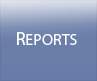
<style>
.page{position:relative;width:97px;height:81px;background:#6b7ea8}
.page>*{position:absolute;margin:0}
.t1{font:16px "MyriadPro-Regular";color:#fefeff}
.t2{font:18px "MyriadPro-Regular";color:#fefeff}
</style>
<div class="page">
<p class="t1" style="left:17px;top:32px;width:60px;height:13px"><span class="t2">R</span>EPORTS</p>
</div>
